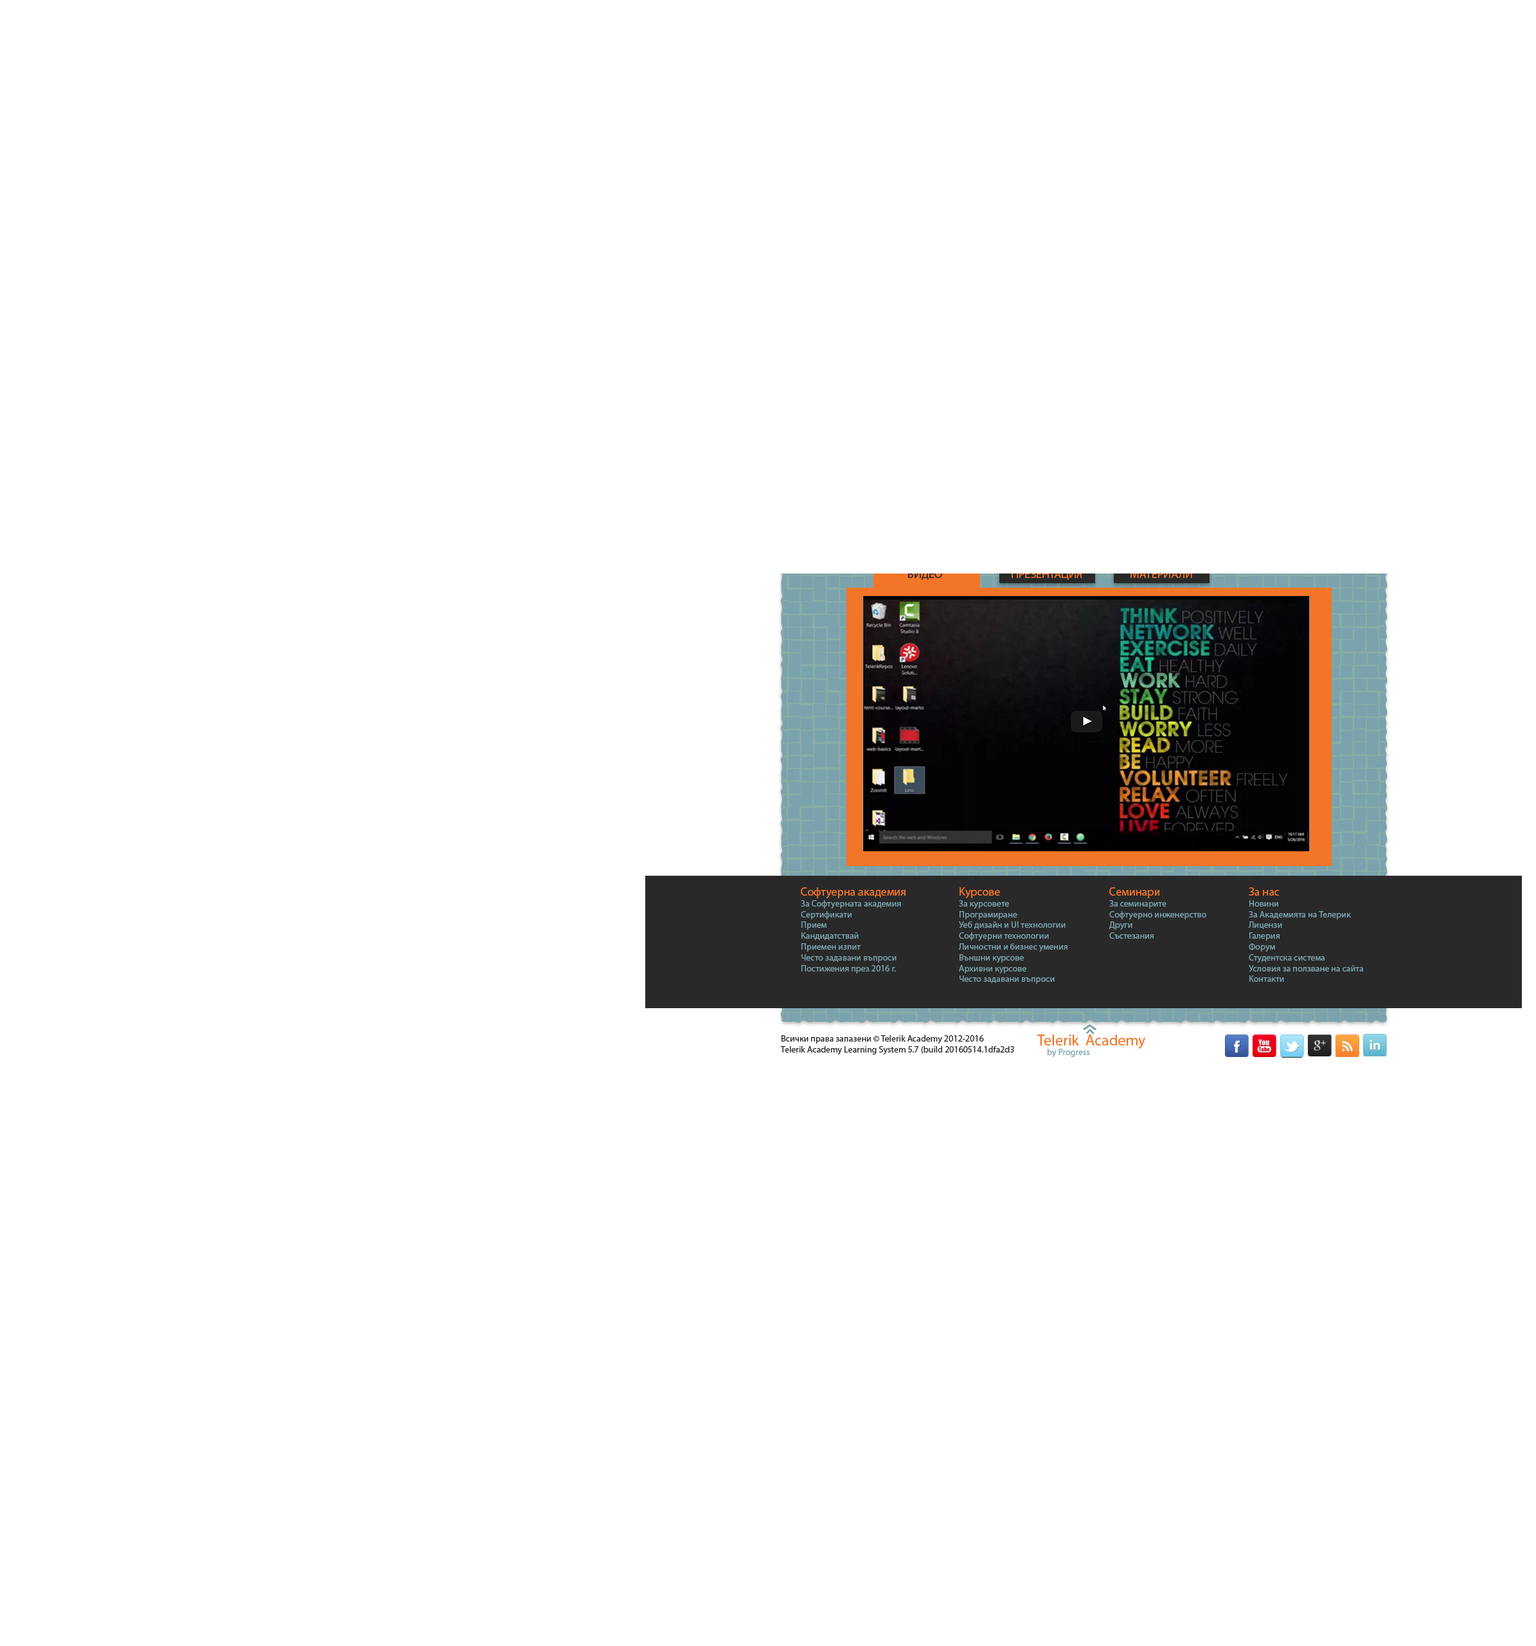
<style>
.page{position:relative;width:1536px;height:1646px;background:#ffffff}
.page>*{position:absolute;margin:0}
.t1{font:9px "MyriadPro-Regular";color:#7ba3ad}
.t2{font:11.6px "MyriadPro-Regular";color:#f37528}
.t3{font:9px "MyriadPro-Regular";color:#292929}
</style>
<div class="page">
<p class="t1" style="left:801px;top:887px;width:105px;height:86px"><span class="t2">Софтуерна академия<br></span>За Софтуерната академия<br>Сертификати<br>Прием<br>Кандидатствай<br>Приемен изпит<br>Често задавани въпроси<br>Постижения през 2016 г.</p>
<p class="t1" style="left:959px;top:887px;width:109px;height:97px"><span class="t2">Kурсове<br></span>За курсовете<br>Програмиране<br>Уеб дизайн и UI технологии<br>Софтуерни технологии<br>Личностни и бизнес умения<br>Външни курсове<br>Архивни курсове<br>Често задавани въпроси</p>
<p class="t1" style="left:1110px;top:887px;width:97px;height:52px"><span class="t2">Семинари<br></span>За семинарите<br>Софтуерно инженерство<br>Други<br>Състезания</p>
<p class="t1" style="left:1248px;top:887px;width:116px;height:95px"><span class="t2">За нас<br></span>Новини<br>За Академията на Телерик<br>Лицензи<br>Галерия<br>Форум<br>Студентска система<br>Условия за ползване на сайта<br>Контакти</p>
<p class="t3" style="left:780px;top:1035px;width:234px;height:20px">Всички права запазени © Telerik Academy 2012-2016<br>Telerik Academy Learning System 5.7 (build 20160514.1dfa2d3</p>
</div>
